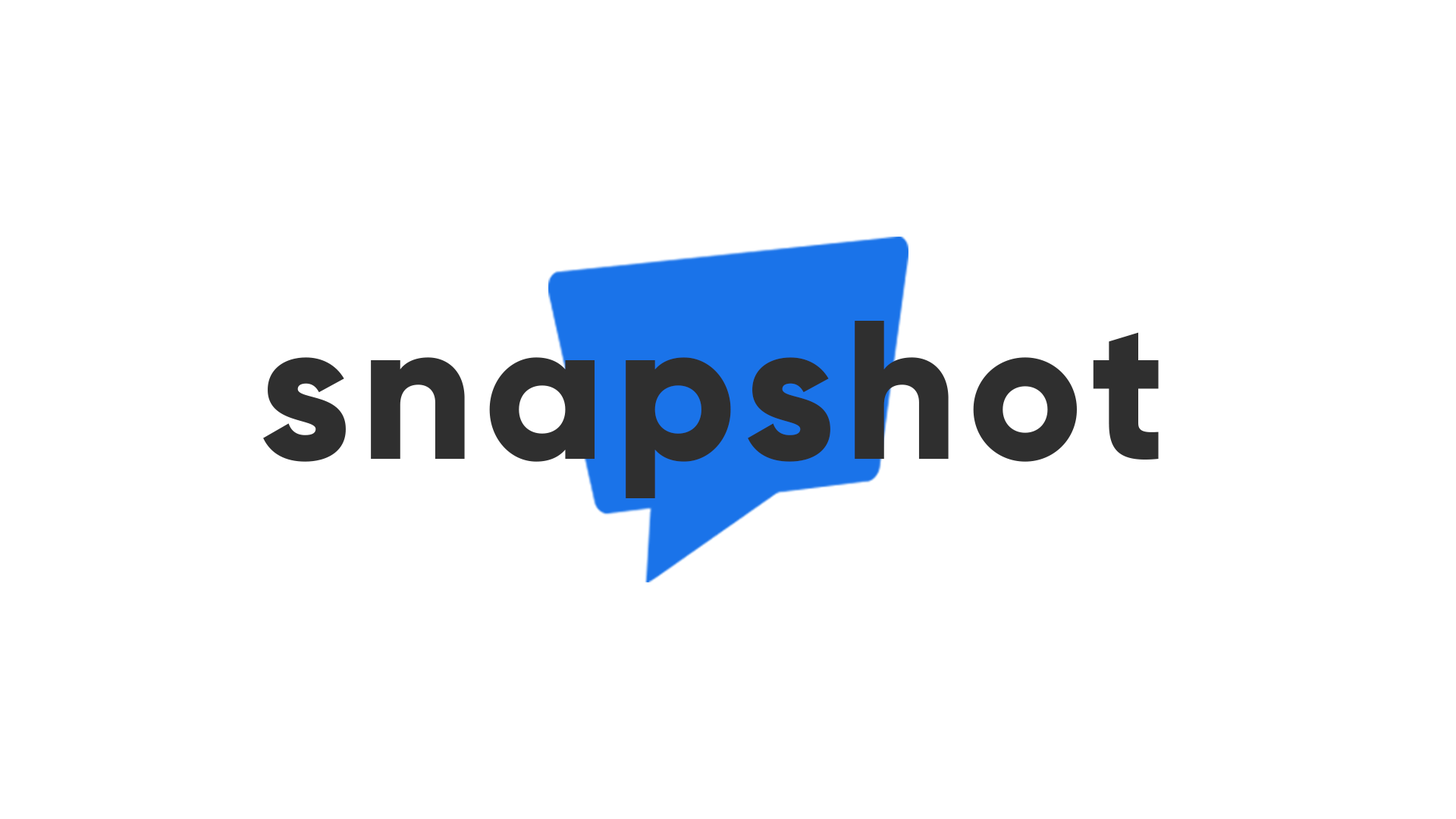
<style>
.page{position:relative;width:1456px;height:819px;background:#ffffff}
.page>*{position:absolute;margin:0}
.t1{font:197.1px "Gilroy-ExtraBold";letter-spacing:0.05em;color:#2f2f2f}
</style>
<div class="page">
<p class="t1" style="left:263px;top:321px;width:896px;height:177px">snapshot</p>
</div>
